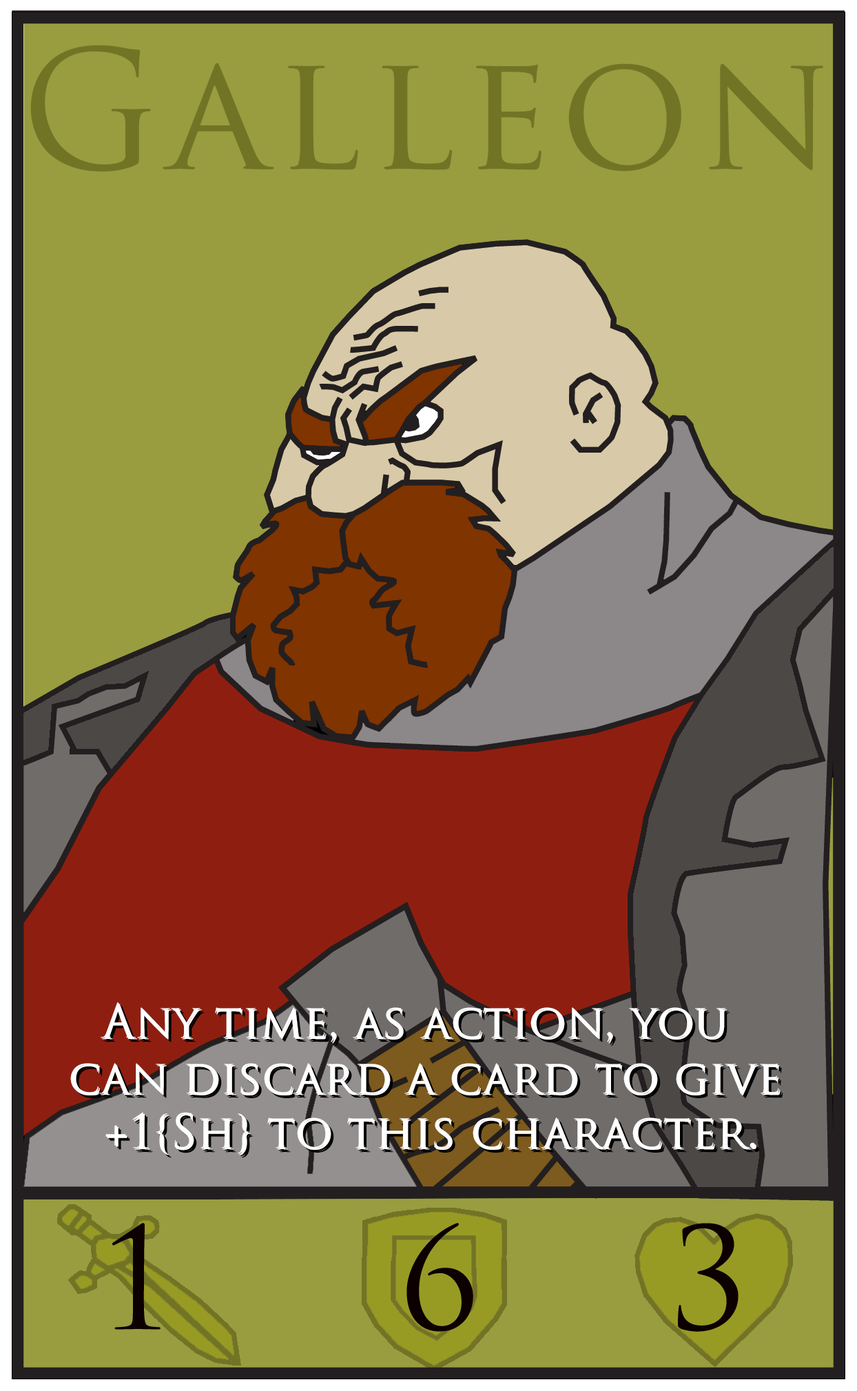
<style>
.page{position:relative;width:857px;height:1391px;background:#999c3f}
.page>*{position:absolute;margin:0}
.t1{font:45.9px "TrajanPro-Regular";color:#ffffff}
</style>
<div class="page">
<p class="t1" style="left:101px;top:1002px;width:625px;height:41px">Any time, as action, you</p>
<p class="t1" style="left:102px;top:1003px;width:626px;height:41px">Any time, as action, you</p>
<p class="t1" style="left:70px;top:1063px;width:709px;height:31px">can discard a card to give</p>
<p class="t1" style="left:72px;top:1065px;width:709px;height:31px">can discard a card to give</p>
<p class="t1" style="left:105px;top:1112px;width:650px;height:42px">+1{Sh} to this character.</p>
<p class="t1" style="left:107px;top:1113px;width:650px;height:43px">+1{Sh} to this character.</p>
</div>
